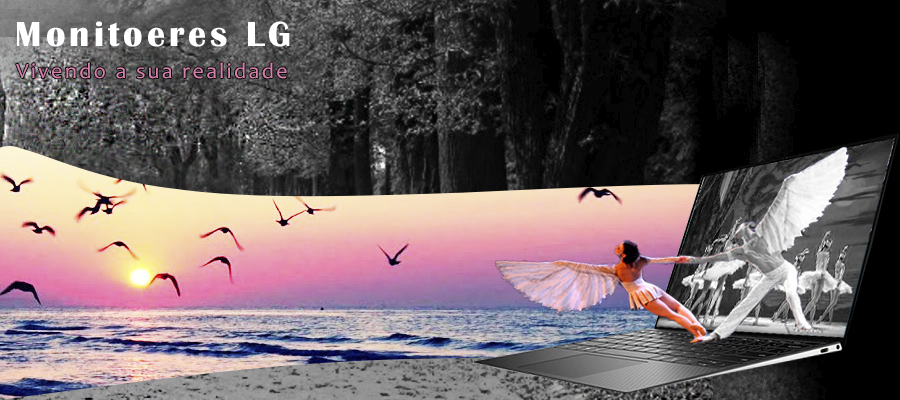
<style>
.page{position:relative;width:900px;height:400px}
.page>*{position:absolute;margin:0}
.t1{font:36px "BritannicBold";letter-spacing:0.11em;color:#ffffff}
.t2{font:22px "Candara";letter-spacing:0.11em;color:#d780ad}
</style>
<div class="page">
<p class="t1" style="left:17px;top:21px;width:273px;height:26px">Monitoeres LG</p>
<p class="t2" style="left:16px;top:62px;width:271px;height:17px">Vivendo a sua realidade</p>
</div>
